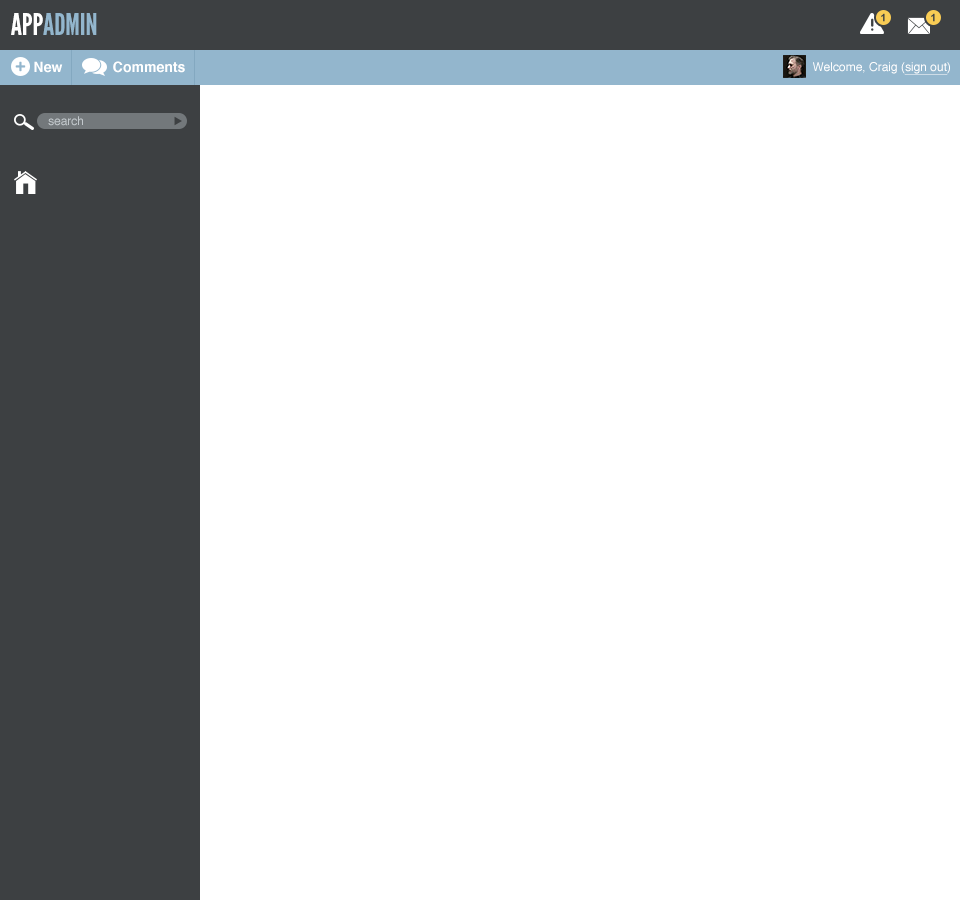
<style>
.page{position:relative;width:960px;height:900px;background:#ffffff}
.page>*{position:absolute;margin:0}
.t1{font:30px "LeagueGothic";color:#93b6cd}
.t2{font:30px "LeagueGothic";color:#ffffff}
.t3{font:14px "Helvetica-Bold";color:#ffffff}
.t4{font:12px "Helvetica";color:#ffffff}
.t5{font:12px "Helvetica";color:#ffffff;text-decoration:underline}
.t6{font:12px "Helvetica";color:#c2c8cc}
</style>
<div class="page">
<p class="t1" style="left:11px;top:13px;width:86px;height:22px"><span class="t2">APP</span>ADMIN</p>
<p class="t3" style="left:34px;top:61px;width:29px;height:12px">New</p>
<p class="t3" style="left:113px;top:61px;width:72px;height:12px">Comments</p>
<p class="t4" style="left:813px;top:62px;width:137px;height:13px">Welcome, Craig (<span class="t5">sign out</span>)</p>
<p class="t6" style="left:48px;top:116px;width:35px;height:10px">search</p>
</div>
